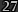
<style>
.page{position:relative;width:18px;height:12px;background:#333333}
.page>*{position:absolute;margin:0}
.t1{font:17px "Perpetua-Bold";color:#c3c3c3}
</style>
<div class="page">
<p class="t1" style="left:2px;top:1px;width:16px;height:10px">27</p>
</div>
